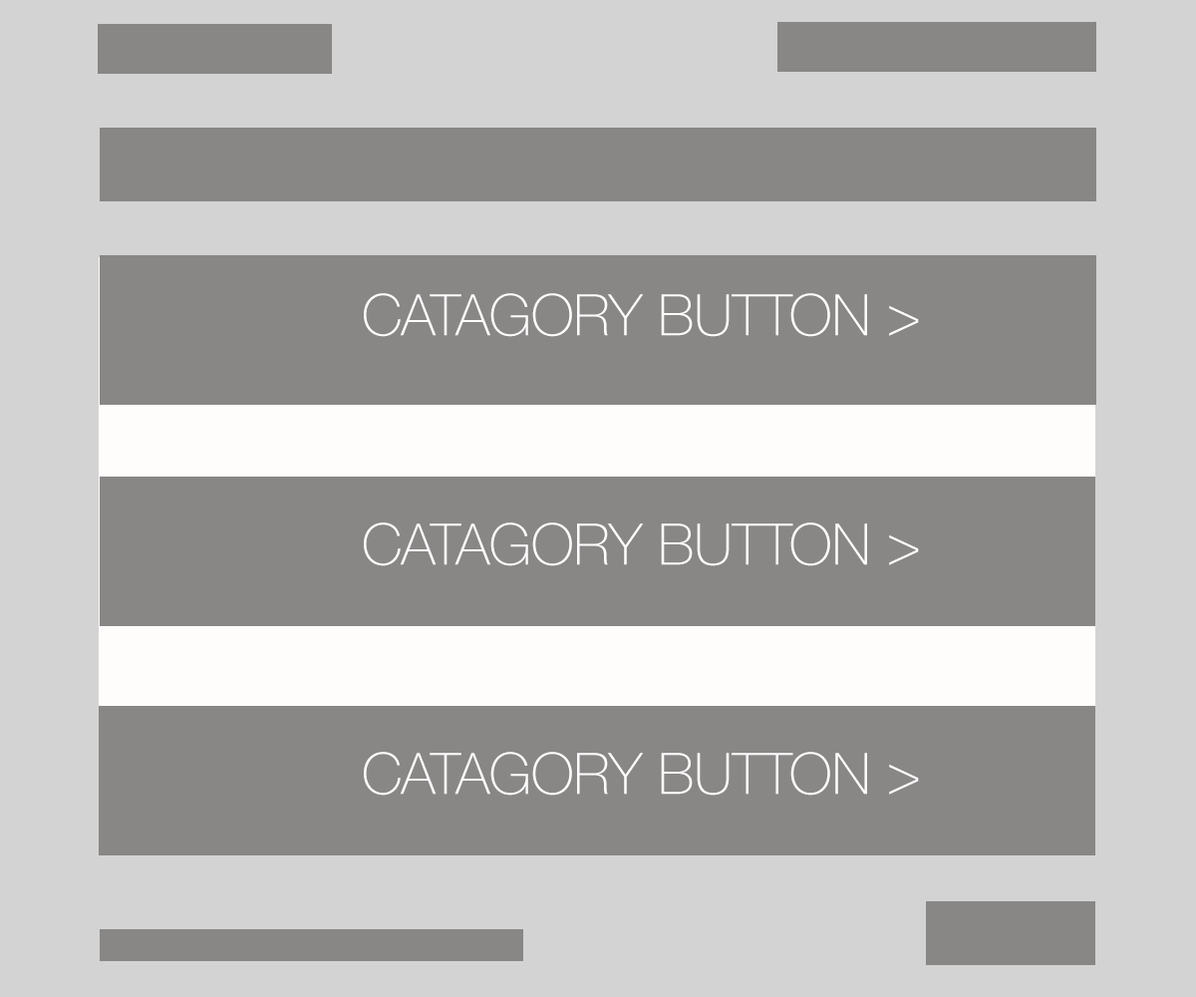
<style>
.page{position:relative;width:1196px;height:997px;background:#898686}
.page>*{position:absolute;margin:0}
.t1{font:57.3px "HelveticaNeue-Thin";color:#fefdfd}
</style>
<div class="page">
<p class="t1" style="left:364px;top:293px;width:555px;height:44px">CATAGORY BUTTON &gt;</p>
<p class="t1" style="left:364px;top:522px;width:555px;height:44px">CATAGORY BUTTON &gt;</p>
<p class="t1" style="left:364px;top:752px;width:555px;height:43px">CATAGORY BUTTON &gt;</p>
</div>
